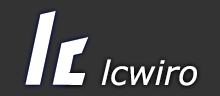
<style>
.page{position:relative;width:220px;height:96px;background:#333333}
.page>*{position:absolute;margin:0}
.t1{font:33.3px "Verdana-Italic";color:#ffffff}
</style>
<div class="page">
<p class="t1" style="left:101px;top:59px;width:96px;height:27px">lcwiro</p>
</div>
